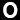
<style>
.page{position:relative;width:20px;height:20px;background:#000000}
.page>*{position:absolute;margin:0}
.t1{font:20px "HelveticaNeue-Bold";color:#ffffff}
</style>
<div class="page">
<p class="t1" style="left:3px;top:2px;width:15px;height:16px">O</p>
</div>
